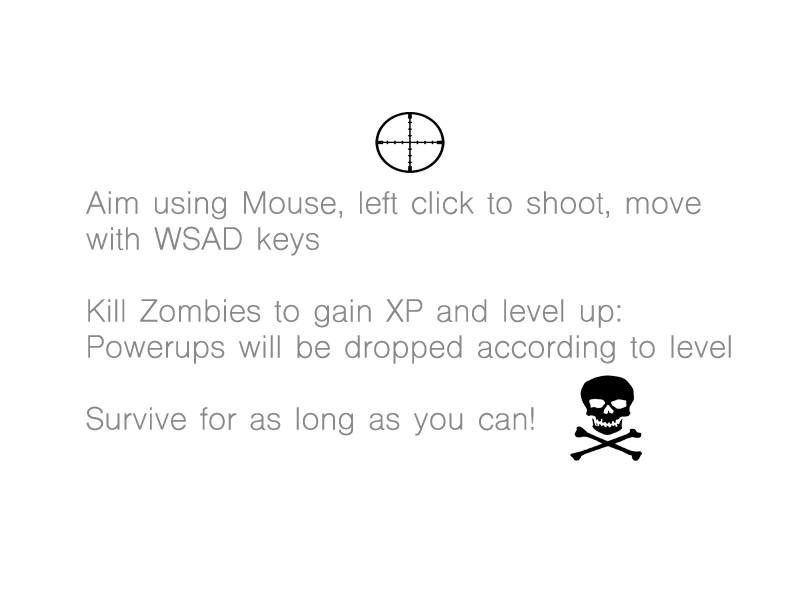
<style>
.page{position:relative;width:800px;height:600px;background:#ffffff}
.page>*{position:absolute;margin:0}
.t1{font:30px "ShreeDev0714";color:#898989;font-weight:bold}
</style>
<div class="page">
<p class="t1" style="left:86px;top:191px;width:645px;height:245px">Aim using Mouse, left click to shoot, move with WSAD keys<br><br>Kill Zombies to gain XP and level up: <br>Powerups will be dropped according to level<br><br>Survive for as long as you can!</p>
</div>
